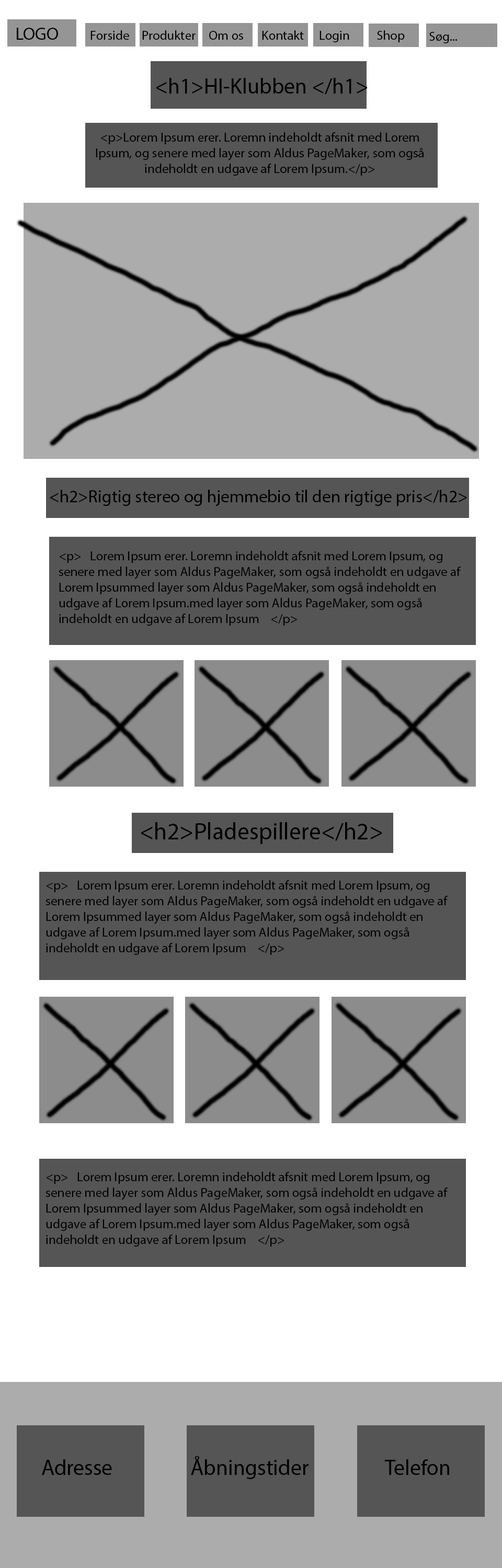
<style>
.page{position:relative;width:502px;height:1568px;background:#ffffff}
.page>*{position:absolute;margin:0}
.t1{font:17.4px "MyriadPro-Regular";color:#000000}
.t2{font:13.1px "MyriadPro-Regular";color:#000000}
.t3{font:21.8px "MyriadPro-Regular";color:#000000}
.t4{font:24px "MyriadPro-Regular";color:#000000}
</style>
<div class="page">
<p class="t1" style="left:17px;top:28px;width:41px;height:12px">LOGO</p>
<p class="t2" style="left:90px;top:30px;width:39px;height:10px">Forside</p>
<p class="t2" style="left:142px;top:30px;width:53px;height:10px">Produkter</p>
<p class="t2" style="left:209px;top:31px;width:34px;height:9px">Om os</p>
<p class="t2" style="left:262px;top:30px;width:42px;height:10px">Kontakt</p>
<p class="t2" style="left:319px;top:31px;width:30px;height:11px">Login</p>
<p class="t2" style="left:377px;top:30px;width:28px;height:12px">Shop</p>
<p class="t2" style="left:429px;top:32px;width:28px;height:11px">Søg...</p>
<p class="t3" style="left:156px;top:78px;width:211px;height:17px">&lt;h1&gt;HI-Klubben &lt;/h1&gt;</p>
<p class="t2" style="left:96px;top:132px;width:328px;height:44px;text-align:center">&lt;p&gt;Lorem Ipsum erer. Loremn indeholdt afsnit med Lorem Ipsum, og senere med layer som Aldus PageMaker, som også indeholdt en udgave af Lorem Ipsum.&lt;/p&gt;</p>
<p class="t1" style="left:50px;top:490px;width:417px;height:16px">&lt;h2&gt;Rigtig stereo og hjemmebio til den rigtige pris&lt;/h2&gt;</p>
<p class="t2" style="left:59px;top:551px;width:402px;height:75px">&lt;p&gt;   Lorem Ipsum erer. Loremn indeholdt afsnit med Lorem Ipsum, og senere med layer som Aldus PageMaker, som også indeholdt en udgave af Lorem Ipsummed layer som Aldus PageMaker, som også indeholdt en udgave af Lorem Ipsum.med layer som Aldus PageMaker, som også indeholdt en udgave af Lorem Ipsum    &lt;/p&gt;</p>
<p class="t4" style="left:141px;top:822px;width:241px;height:22px">&lt;h2&gt;Pladespillere&lt;/h2&gt;</p>
<p class="t2" style="left:45px;top:880px;width:403px;height:75px">&lt;p&gt;   Lorem Ipsum erer. Loremn indeholdt afsnit med Lorem Ipsum, og senere med layer som Aldus PageMaker, som også indeholdt en udgave af Lorem Ipsummed layer som Aldus PageMaker, som også indeholdt en udgave af Lorem Ipsum.med layer som Aldus PageMaker, som også indeholdt en udgave af Lorem Ipsum    &lt;/p&gt;</p>
<p class="t2" style="left:45px;top:1172px;width:403px;height:75px">&lt;p&gt;   Lorem Ipsum erer. Loremn indeholdt afsnit med Lorem Ipsum, og senere med layer som Aldus PageMaker, som også indeholdt en udgave af Lorem Ipsummed layer som Aldus PageMaker, som også indeholdt en udgave af Lorem Ipsum.med layer som Aldus PageMaker, som også indeholdt en udgave af Lorem Ipsum    &lt;/p&gt;</p>
<p class="t3" style="left:191px;top:1456px;width:117px;height:23px">Åbningstider</p>
<p class="t3" style="left:42px;top:1459px;width:70px;height:16px">Adresse</p>
<p class="t3" style="left:384px;top:1459px;width:65px;height:16px">Telefon</p>
</div>
